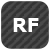
<style>
.page{position:relative;width:50px;height:50px}
.page>*{position:absolute;margin:0}
.t1{font:19px "Verdana-Bold";color:#ffffff}
</style>
<div class="page">
<p class="t1" style="left:13px;top:18px;width:26px;height:14px">RF</p>
</div>
